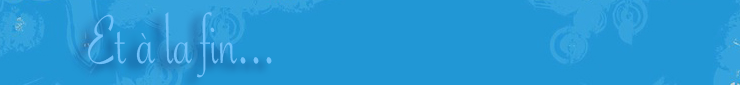
<style>
.page{position:relative;width:740px;height:85px;background:#2197d5}
.page>*{position:absolute;margin:0}
.t1{font:75px "SavoyeLetPlain";letter-spacing:-0.007em;color:#6fc1fa;scale:0.78 1}
</style>
<div class="page">
<p class="t1" style="left:88px;top:12px;width:184px;height:66px">Et à la fin...</p>
</div>
